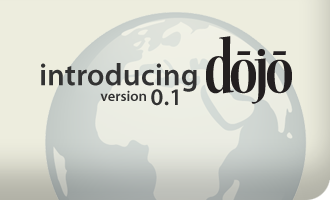
<style>
.page{position:relative;width:330px;height:200px;background:#ededde}
.page>*{position:absolute;margin:0}
.t1{font:31.4px "MyriadPro-Semibold";color:#323232}
.t2{font:24px "MyriadPro-Semibold";color:#323232}
.t3{font:14.7px "MyriadPro-Semibold";color:#323232}
</style>
<div class="page">
<p class="t1" style="left:41px;top:63px;width:156px;height:29px">introducing</p>
<p class="t2" style="left:151px;top:89px;width:27px;height:17px">0.1</p>
<p class="t3" style="left:100px;top:90px;width:46px;height:11px">version</p>
</div>
